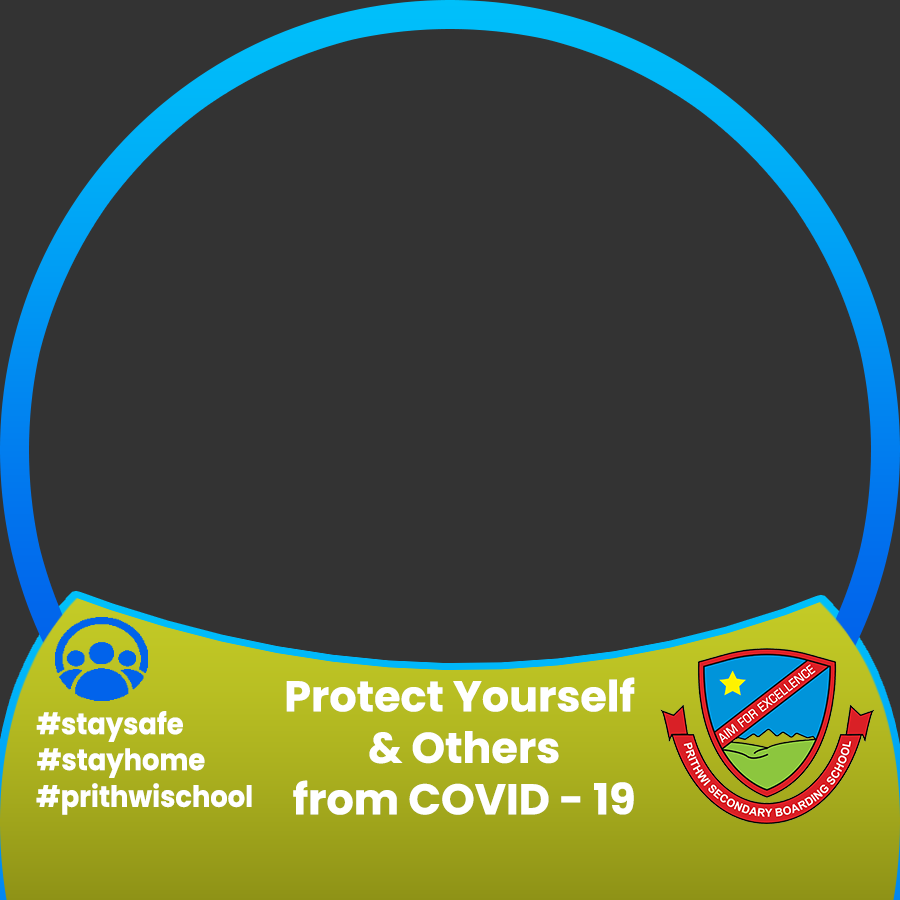
<style>
.page{position:relative;width:900px;height:900px;background:#333333}
.page>*{position:absolute;margin:0}
.t1{font:42.9px "Poppins-Bold";color:#ffffff}
.t2{font:29.4px "Poppins-Bold";color:#ffffff;scale:0.93 1}
</style>
<div class="page">
<p class="t1" style="left:286px;top:677px;width:349px;height:138px;text-align:center">Protect Yourself <br>&amp; Others<br>from COVID - 19</p>
<p class="t2" style="left:36px;top:711px;width:147px;height:31px">#staysafe</p>
<p class="t2" style="left:37px;top:748px;width:168px;height:30px">#stayhome</p>
<p class="t2" style="left:36px;top:783px;width:216px;height:32px">#prithwischool</p>
</div>
